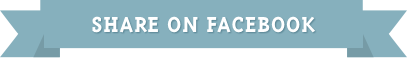
<style>
.page{position:relative;width:407px;height:58px;background:#86b0bd}
.page>*{position:absolute;margin:0}
.t1{font:25px "TriplexSerif-Bold";letter-spacing:0.04em;color:#ffffff}
</style>
<div class="page">
<p class="t1" style="left:92px;top:16px;width:223px;height:17px">SHARE ON FACEBOOK</p>
</div>
